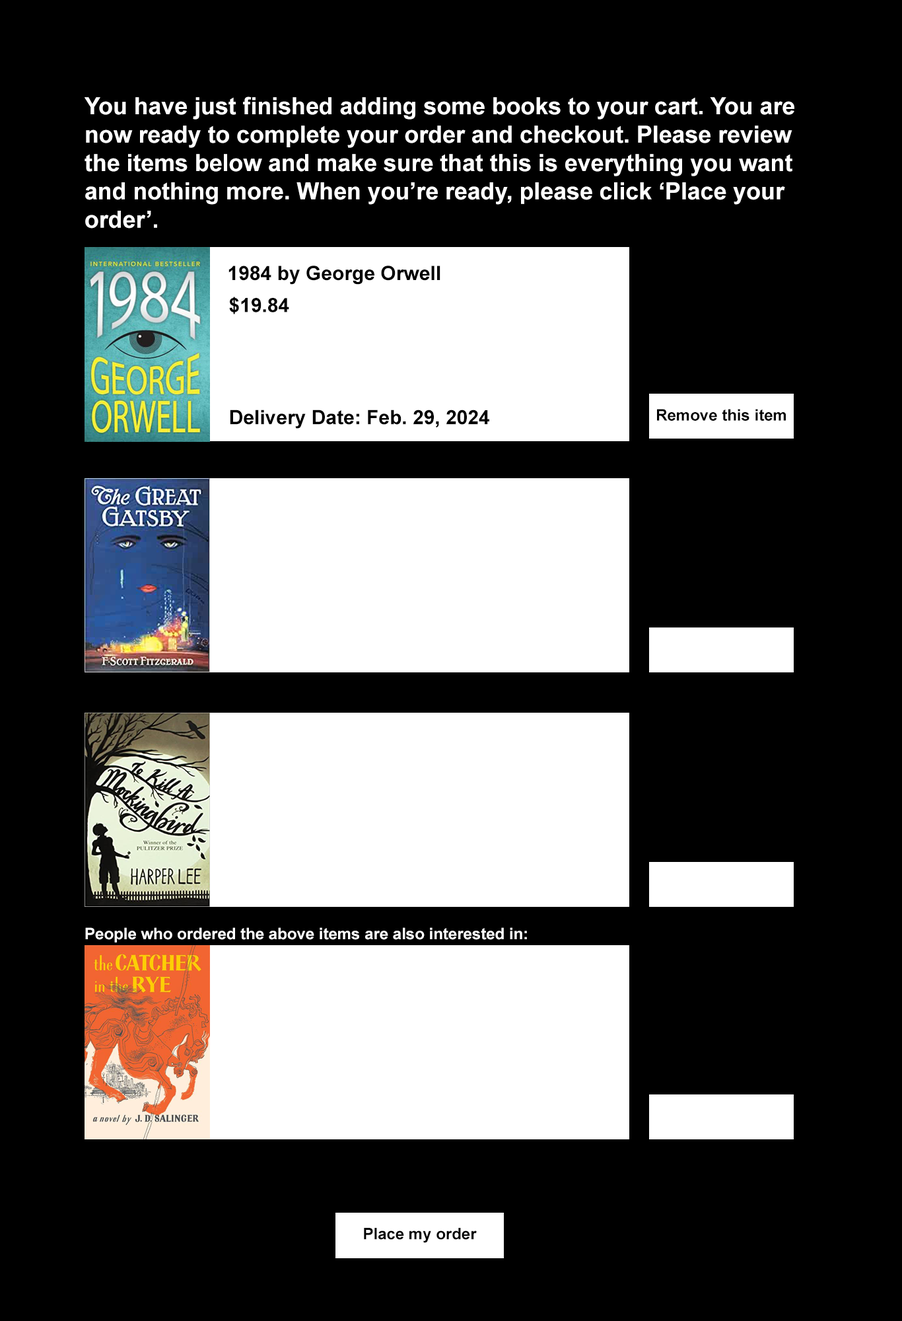
<style>
.page{position:relative;width:902px;height:1321px;background:#000000}
.page>*{position:absolute;margin:0}
.t1{font:23.6px "Arial-BoldMT";color:#ffffff}
.t2{font:19.8px "Arial-BoldMT";color:#000000}
.t3{font:15.9px "Arial-BoldMT";color:#000000}
.t4{font:15.9px "Arial-BoldMT";color:#ffffff}
</style>
<div class="page">
<p class="t1" style="left:85px;top:96px;width:710px;height:133px">You have just finished adding some books to your cart. You are now ready to complete your order and checkout. Please review the items below and make sure that this is everything you want and nothing more. When you’re ready, please click ‘Place your order’.</p>
<p class="t2" style="left:229px;top:266px;width:212px;height:19px">1984 by George Orwell</p>
<p class="t2" style="left:229px;top:297px;width:60px;height:17px">$19.84</p>
<p class="t2" style="left:230px;top:410px;width:260px;height:19px">Delivery Date: Feb. 29, 2024</p>
<p class="t3" style="left:657px;top:409px;width:129px;height:12px">Remove this item</p>
<p class="t4" style="left:85px;top:928px;width:442px;height:15px">People who ordered the above items are also interested in:</p>
<p class="t3" style="left:364px;top:1228px;width:113px;height:15px">Place my order</p>
</div>
